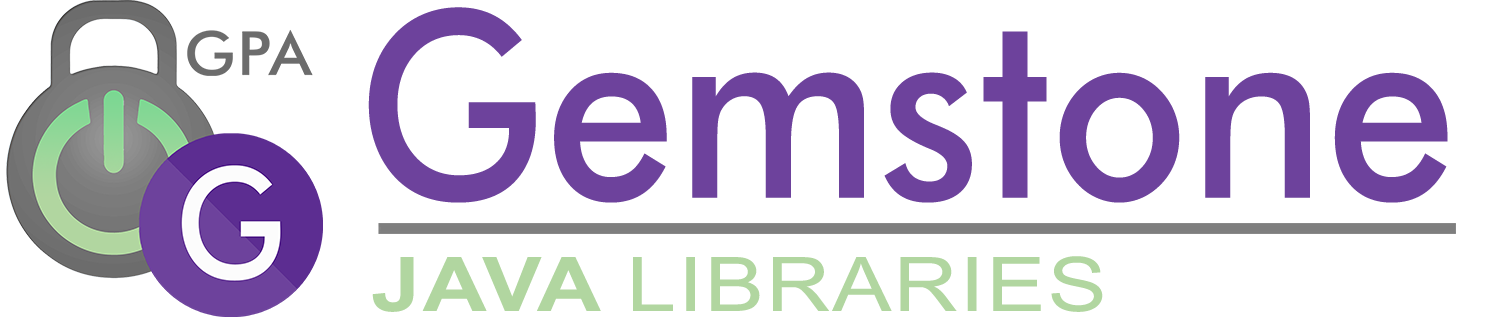
<style>
.page{position:relative;width:1492px;height:326px;background:#ffffff}
.page>*{position:absolute;margin:0}
.t1{font:260.1px "FuturaBT-Medium";color:#6d429c;scale:0.9 1}
.t2{font:75px "ArialMT";letter-spacing:0.025em;color:#b1d6a0;scale:1.18 1}
.t3{font:75px "Arial-BoldMT";letter-spacing:0.025em;color:#b1d6a0;scale:1.18 1}
</style>
<div class="page">
<p class="t1" style="left:368px;top:7px;width:1080px;height:196px">Gemstone</p>
<p class="t2" style="left:372px;top:256px;width:731px;height:56px"><span class="t3"> JAVA </span>LIBRARIES</p>
</div>
